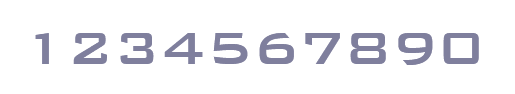
<style>
.page{position:relative;width:515px;height:94px;background:#ffffff}
.page>*{position:absolute;margin:0}
.t1{font:60px "BankGothicBT-Medium";color:#7f7f9d}
</style>
<div class="page">
<p class="t1" style="left:35px;top:33px;width:444px;height:32px">1234567890</p>
</div>
